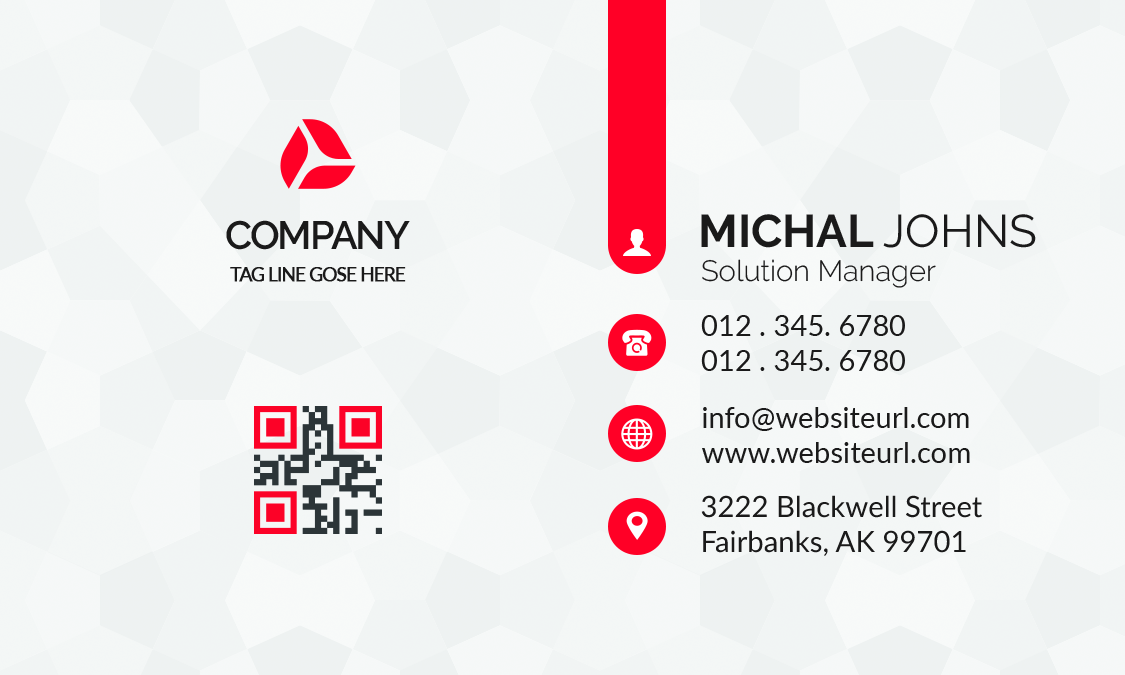
<style>
.page{position:relative;width:1125px;height:675px}
.page>*{position:absolute;margin:0}
.t1{font:39.6px "Raleway-SemiBold";letter-spacing:-0.05em;color:#1a1a1a;text-transform:uppercase}
.t2{font:45.8px "Raleway-Bold";color:#1a1a1a}
.t3{font:45.8px "Raleway-Regular";color:#1a1a1a}
.t4{font:18.8px "Lato-Regular";letter-spacing:-0.065em;color:#1a1a1a;text-transform:uppercase;font-weight:bold}
.t5{font:29.2px "Raleway-Light";color:#1a1a1a}
.t6{font:29.2px "Lato-Regular";color:#1a1a1a}
</style>
<div class="page">
<p class="t1" style="left:226px;top:220px;width:184px;height:30px">Company</p>
<p class="t2" style="left:701px;top:214px;width:335px;height:34px">MICHAL <span class="t3">JOHNS</span></p>
<p class="t4" style="left:230px;top:267px;width:176px;height:15px">Tag line gose here</p>
<p class="t5" style="left:702px;top:259px;width:234px;height:29px">Solution Manager</p>
<p class="t6" style="left:701px;top:315px;width:204px;height:56px">012 . 345. 6780<br>012 . 345. 6780</p>
<p class="t6" style="left:702px;top:407px;width:268px;height:56px">info@websiteurl.com<br>www.websiteurl.com</p>
<p class="t6" style="left:701px;top:495px;width:281px;height:61px">3222 Blackwell Street<br>Fairbanks, AK 99701</p>
</div>
